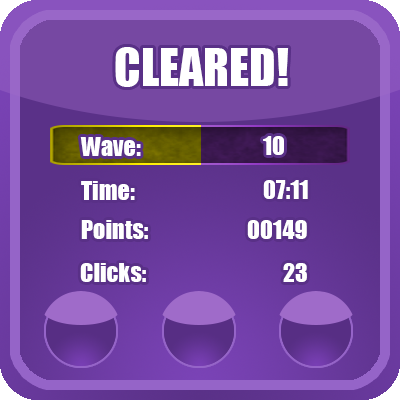
<style>
.page{position:relative;width:400px;height:400px}
.page>*{position:absolute;margin:0}
.t1{font:48px "Impact";color:#ffffff}
.t2{font:24px "Impact";color:#ffffff}
</style>
<div class="page">
<p class="t1" style="left:115px;top:47px;width:174px;height:40px">CLEARED!</p>
<p class="t1" style="left:115px;top:47px;width:174px;height:40px">CLEARED!</p>
<p class="t2" style="left:80px;top:137px;width:61px;height:19px">Wave:</p>
<p class="t2" style="left:263px;top:136px;width:21px;height:19px">10</p>
<p class="t2" style="left:81px;top:181px;width:54px;height:19px">Time:</p>
<p class="t2" style="left:263px;top:180px;width:45px;height:19px">07:11</p>
<p class="t2" style="left:81px;top:220px;width:67px;height:19px">Points:</p>
<p class="t2" style="left:247px;top:220px;width:60px;height:19px">00149</p>
<p class="t2" style="left:80px;top:263px;width:66px;height:19px">Clicks:</p>
<p class="t2" style="left:283px;top:263px;width:24px;height:19px">23</p>
</div>
